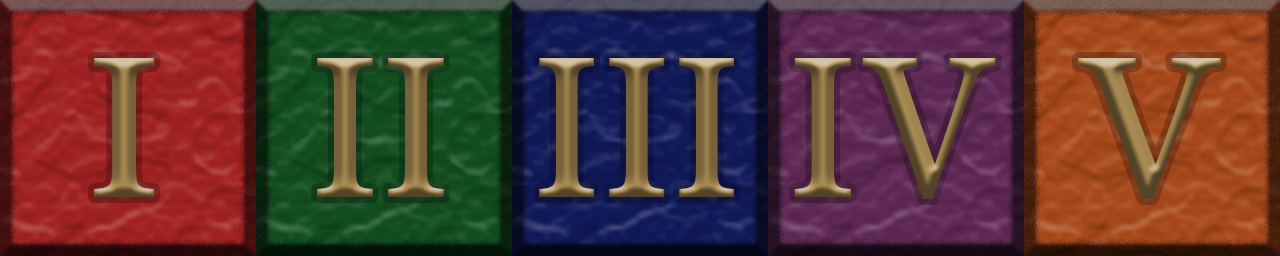
<style>
.page{position:relative;width:1280px;height:256px}
.page>*{position:absolute;margin:0}
.t1{font:231.1px "AdobeGurmukhi-Bold"}
.t2{font:231.1px "AdobeGurmukhi-Bold";scale:0.92 1}
.t3{font:231.1px "AdobeGurmukhi-Bold";scale:0.9 1}
.t4{font:231.1px "AdobeGurmukhi-Bold";scale:0.93 1}
</style>
<div class="page">
<p class="t1" style="left:94px;top:58px;width:61px;height:139px">I</p>
<p class="t2" style="left:317px;top:58px;width:127px;height:139px">II</p>
<p class="t3" style="left:539px;top:58px;width:195px;height:139px">III</p>
<p class="t4" style="left:794px;top:58px;width:202px;height:141px">IV</p>
<p class="t1" style="left:1078px;top:58px;width:143px;height:141px">V</p>
</div>
